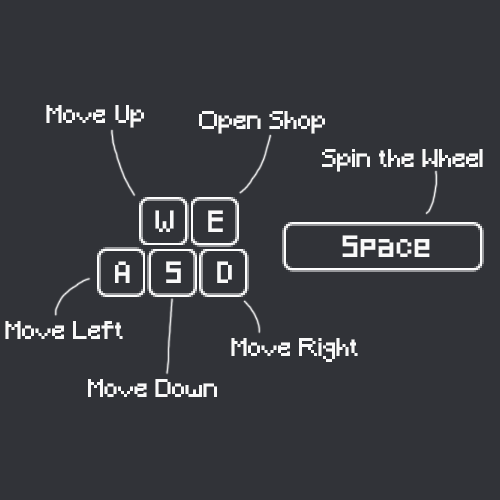
<style>
.page{position:relative;width:500px;height:500px;background:#313338}
.page>*{position:absolute;margin:0}
.t1{font:24px "Minecraft";color:#f9f9f9}
.t2{font:18px "Pixeled";color:#f9f9f9}
</style>
<div class="page">
<p class="t1" style="left:46px;top:105px;width:98px;height:23px">Move Up</p>
<p class="t1" style="left:199px;top:111px;width:126px;height:23px">Open Shop</p>
<p class="t1" style="left:322px;top:149px;width:161px;height:23px">Spin the Wheel</p>
<p class="t2" style="left:155px;top:210px;width:19px;height:22px">W</p>
<p class="t2" style="left:208px;top:210px;width:15px;height:22px">E</p>
<p class="t2" style="left:342px;top:235px;width:88px;height:22px">Space</p>
<p class="t2" style="left:115px;top:261px;width:15px;height:22px">A</p>
<p class="t2" style="left:166px;top:261px;width:15px;height:22px">S</p>
<p class="t2" style="left:217px;top:261px;width:15px;height:22px">D</p>
<p class="t1" style="left:5px;top:321px;width:118px;height:18px">Move Left</p>
<p class="t1" style="left:231px;top:338px;width:127px;height:24px">Move Right</p>
<p class="t1" style="left:88px;top:379px;width:129px;height:18px">Move Down</p>
</div>
